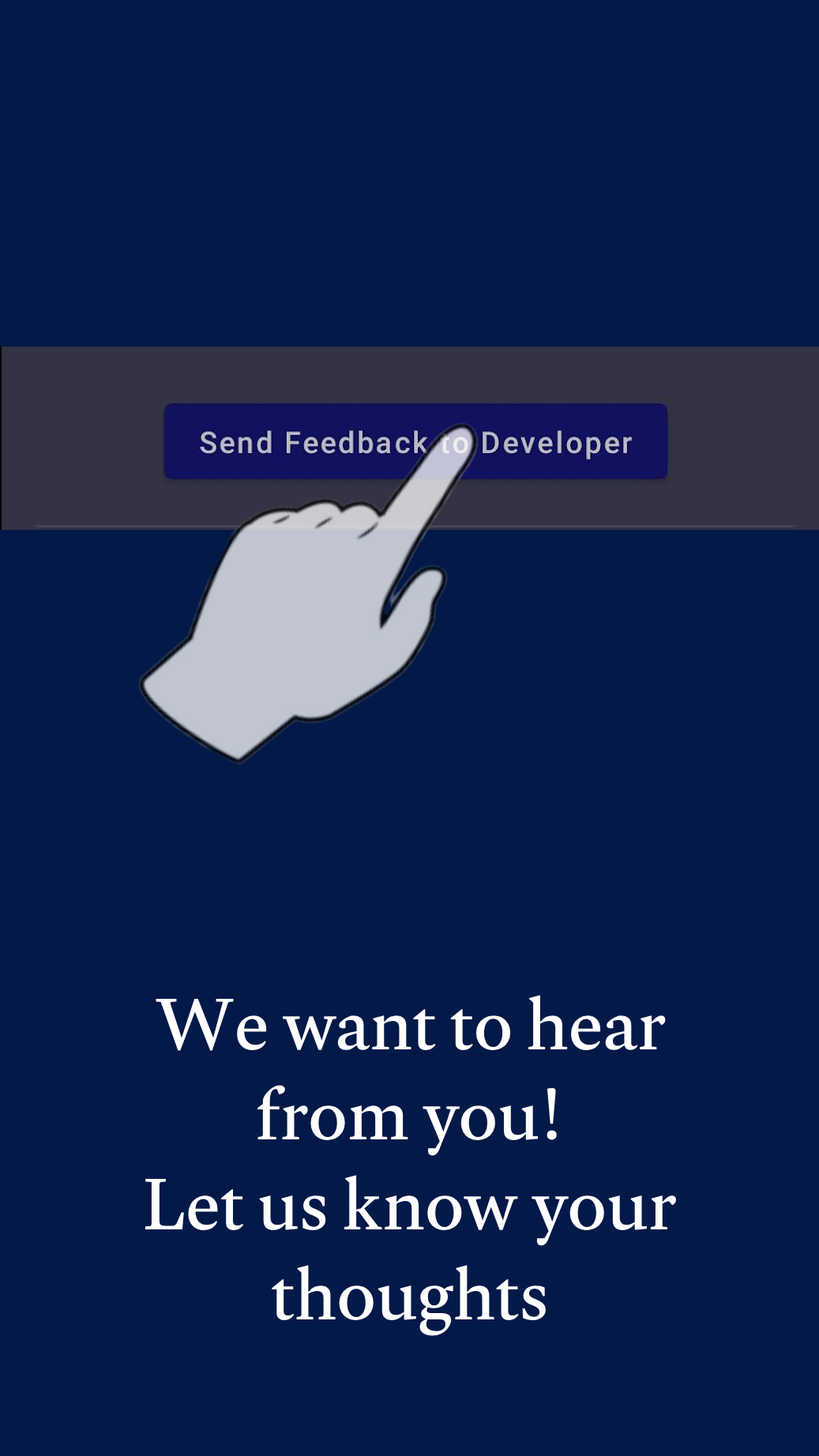
<style>
.page{position:relative;width:819px;height:1456px;background:#031948}
.page>*{position:absolute;margin:0}
.t1{font:75px "Gulzar-Regular";color:#ffffff}
</style>
<div class="page">
<p class="t1" style="left:145px;top:995px;width:531px;height:341px;text-align:center">We want to hear from you! <br>Let us know your thoughts</p>
</div>
